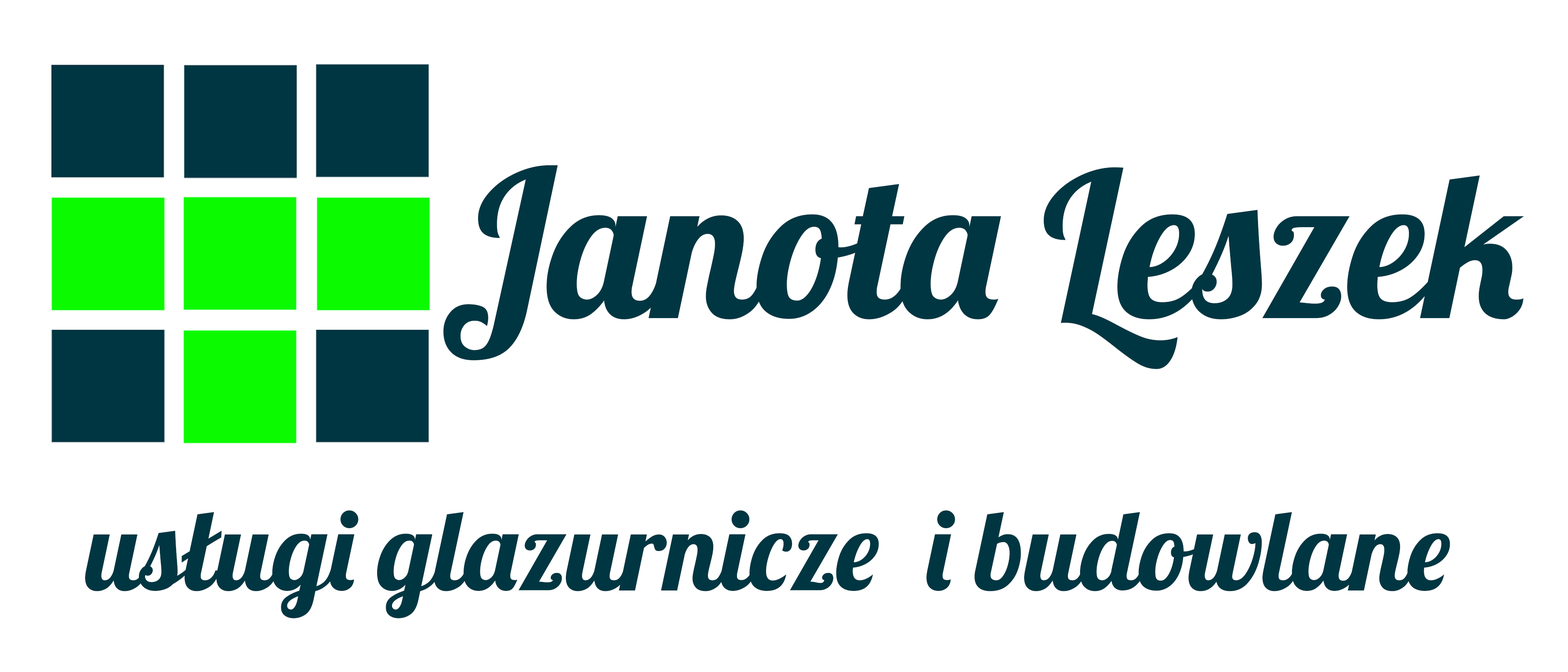
<style>
.page{position:relative;width:1568px;height:672px;background:#ffffff}
.page>*{position:absolute;margin:0}
.t1{font:203.8px "Lobster-Regular";color:#003642}
.t2{font:112px "Lobster-Regular";color:#003642}
</style>
<div class="page">
<p class="t1" style="left:443px;top:165px;width:1081px;height:204px">Janota Leszek</p>
<p class="t2" style="left:85px;top:510px;width:1365px;height:108px">usługi glazurnicze  i budowlane</p>
</div>
